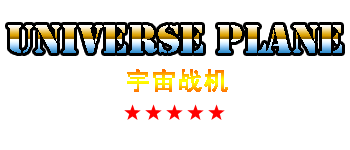
<style>
.page{position:relative;width:350px;height:150px;background:#ffffff}
.page>*{position:absolute;margin:0}
.t1{font:37px "StencilStd"}
.t2{font:25px "SimHei";font-weight:bold}
</style>
<div class="page">
<p class="t1" style="left:8px;top:25px;width:334px;height:28px">Universe Plane</p>
<p class="t2" style="left:127px;top:69px;width:101px;height:23px">宇宙战机</p>
</div>
